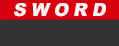
<style>
.page{position:relative;width:119px;height:46px;background:#333333}
.page>*{position:absolute;margin:0}
.t1{font:18px "Arial-Black";letter-spacing:0.26em;color:#f2f2f2;font-style:italic}
</style>
<div class="page">
<p class="t1" style="left:14px;top:3px;width:92px;height:14px">SWORD</p>
</div>
